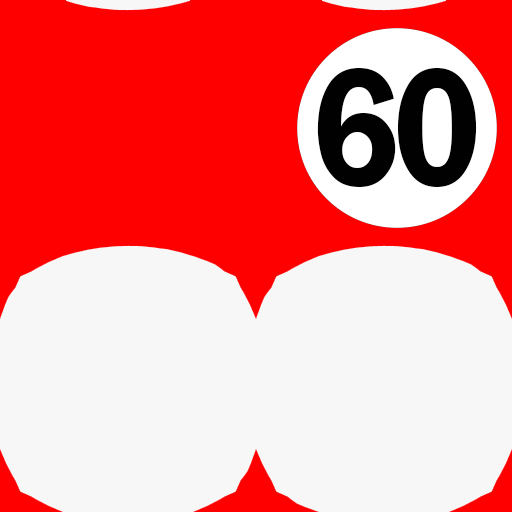
<style>
.page{position:relative;width:512px;height:512px;background:#f7f7f7}
.page>*{position:absolute;margin:0}
.t1{font:172.5px "FranklinGothic-Demi";letter-spacing:-0.05em;color:#010101;scale:0.87 1}
</style>
<div class="page">
<p class="t1" style="left:317px;top:68px;width:160px;height:119px">60</p>
</div>
